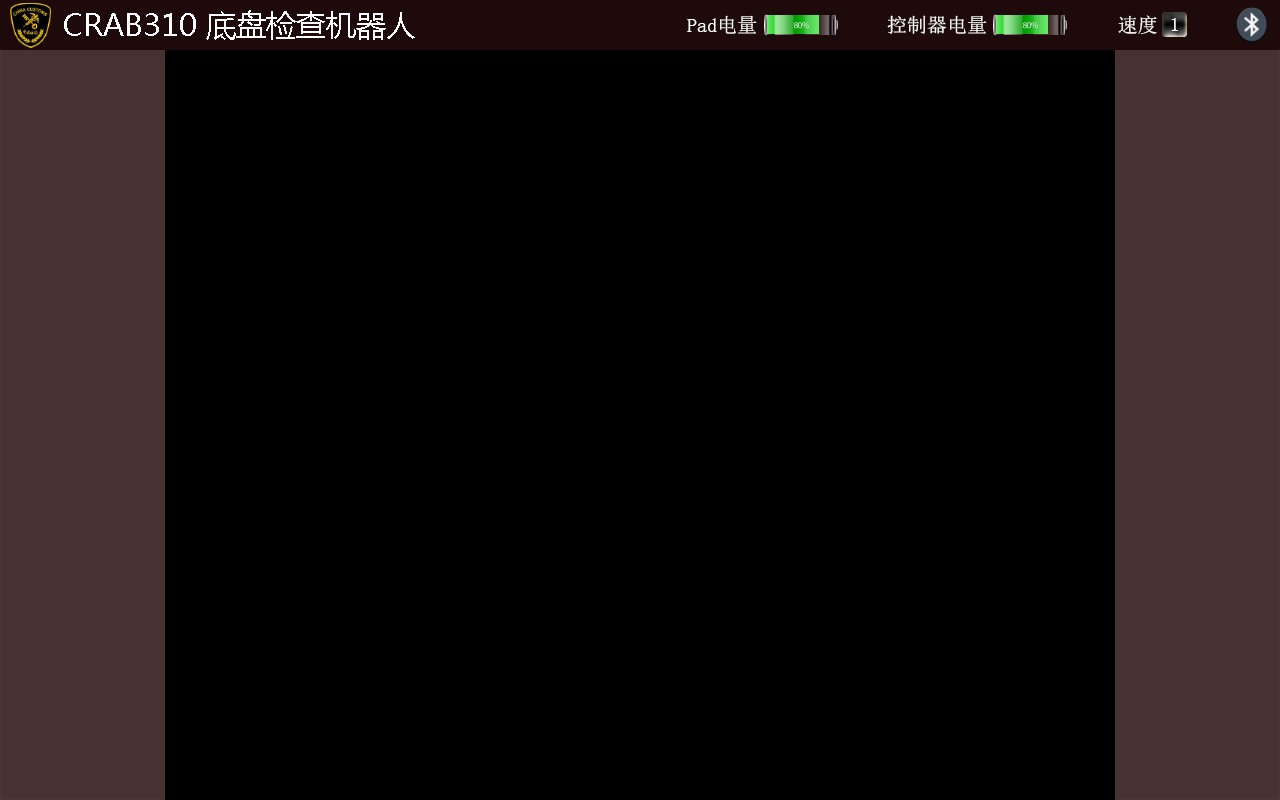
<style>
.page{position:relative;width:1280px;height:800px;background:#000000}
.page>*{position:absolute;margin:0}
.t1{font:30px "MicrosoftYaHei";color:#ffffff}
.t2{font:20px "SimSun";color:#ffffff}
.t3{font:9.1px "MyriadPro-Regular";letter-spacing:-0.05em}
</style>
<div class="page">
<p class="t1" style="left:64px;top:10px;width:351px;height:30px">CRAB310 底盘检查机器人</p>
<p class="t2" style="left:687px;top:15px;width:70px;height:19px">Pad电量</p>
<p class="t2" style="left:887px;top:15px;width:100px;height:19px">控制器电量</p>
<p class="t2" style="left:1118px;top:15px;width:39px;height:20px">速度</p>
<p class="t3" style="left:794px;top:22px;width:15px;height:7px">80%</p>
<p class="t3" style="left:1023px;top:22px;width:15px;height:7px">80%</p>
<p class="t2" style="left:1171px;top:18px;width:7px;height:13px">1</p>
</div>
